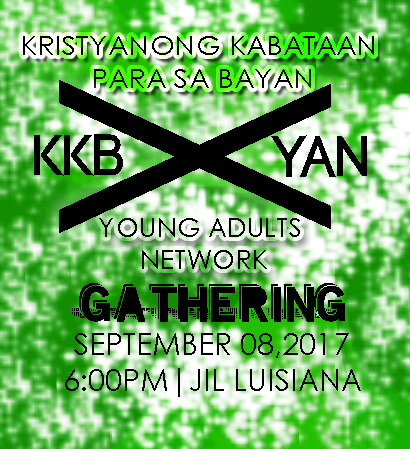
<style>
.page{position:relative;width:410px;height:449px}
.page>*{position:absolute;margin:0}
.t1{font:27.1px "CenturyGothic";color:#000000;scale:1.05 1}
.t2{font:378.4px "CenturyGothic";color:#000000;scale:0.75 1}
.t3{font:57.9px "Code-Bold";color:#010101}
.t4{font:58.6px "Code-Bold";color:#010101}
.t5{font:26.6px "CenturyGothic";color:#010101}
.t6{font:80px "DoubleShadow";color:#000000}
.t7{font:30px "CenturyGothic";color:#000000}
</style>
<div class="page">
<p class="t1" style="left:23px;top:36px;width:351px;height:52px;text-align:center">KRISTYANONG KABATAAN <br>PARA SA BAYAN</p>
<p class="t2" style="left:59px;top:80px;width:272px;height:153px;rotate:90deg">X</p>
<p class="t3" style="left:34px;top:134px;width:89px;height:42px">KKB</p>
<p class="t4" style="left:271px;top:135px;width:96px;height:42px">YAN</p>
<p class="t5" style="left:99px;top:218px;width:201px;height:51px;text-align:center">YOUNG ADULTS <br>NETWORK</p>
<p class="t6" style="left:72px;top:283px;width:273px;height:39px">GATHERING</p>
<p class="t7" style="left:65px;top:333px;width:296px;height:64px;text-align:center">SEPTEMBER 08,2017<br>6:00PM|JIL LUISIANA</p>
</div>
